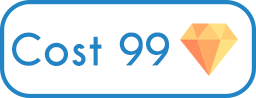
<style>
.page{position:relative;width:256px;height:98px;background:#ffffff}
.page>*{position:absolute;margin:0}
.t1{font:41.7px "CaviarDreams-Bold";color:#2185c5}
</style>
<div class="page">
<p class="t1" style="left:12px;top:32px;width:157px;height:34px">Cost 99</p>
</div>
